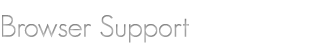
<style>
.page{position:relative;width:310px;height:55px;background:#ffffff}
.page>*{position:absolute;margin:0}
.t1{font:30px "GeosansLight";color:#9c9c9c}
</style>
<div class="page">
<p class="t1" style="left:2px;top:15px;width:187px;height:28px">Browser Support</p>
</div>
